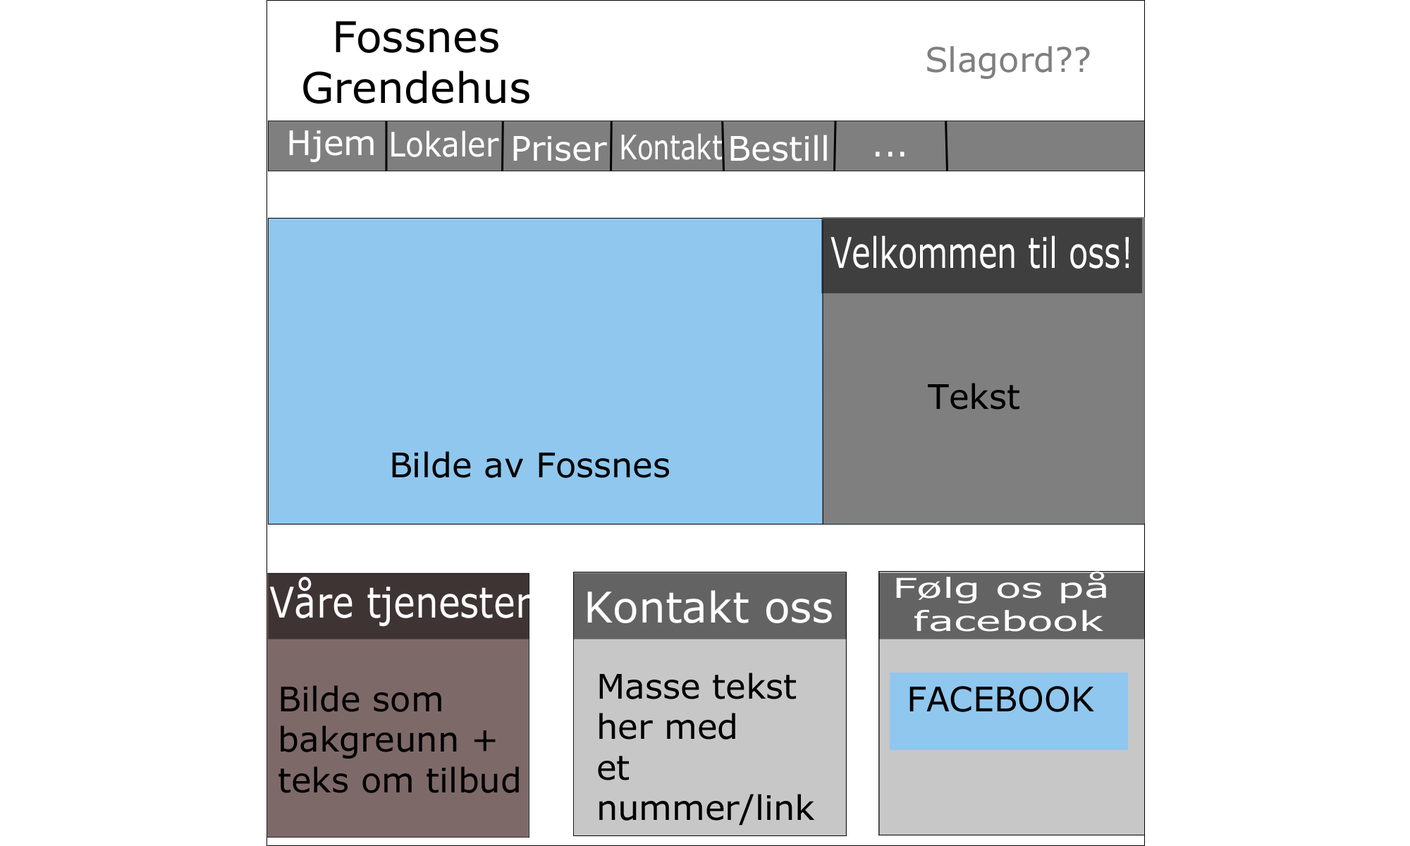
<style>
.page{position:relative;width:1410px;height:846px;background:#ffffff}
.page>*{position:absolute;margin:0}
.t1{font:42.3px "Verdana";color:#000000}
.t2{font:33.8px "Verdana";color:#7f7f7f}
.t3{font:33.8px "Verdana";color:#ffffff}
.t4{font:33.8px "Verdana";color:#ffffff;scale:0.89 1}
.t5{font:33.8px "Verdana";color:#ffffff;scale:0.78 1}
.t6{font:42.3px "Verdana";color:#ffffff;scale:0.74 1}
.t7{font:33.8px "Verdana";color:#000000}
.t8{font:42.3px "Verdana";color:#ffffff;scale:0.86 1}
.t9{font:27.5px "Verdana";color:#ffffff;scale:1.54 1}
.t10{font:42.3px "Verdana";color:#ffffff}
</style>
<div class="page">
<p class="t1" style="left:303px;top:21px;width:226px;height:83px;text-align:center">Fossnes<br>Grendehus</p>
<p class="t2" style="left:927px;top:46px;width:163px;height:33px">Slagord??</p>
<p class="t3" style="left:289px;top:130px;width:85px;height:32px">Hjem</p>
<p class="t4" style="left:391px;top:130px;width:108px;height:27px">Lokaler</p>
<p class="t3" style="left:513px;top:136px;width:94px;height:25px">Priser</p>
<p class="t5" style="left:621px;top:133px;width:101px;height:27px">Kontakt</p>
<p class="t3" style="left:730px;top:135px;width:97px;height:26px">Bestill</p>
<p class="t3" style="left:875px;top:152px;width:29px;height:4px">...</p>
<p class="t6" style="left:830px;top:235px;width:299px;height:34px">Velkommen til oss!</p>
<p class="t7" style="left:928px;top:383px;width:91px;height:27px">Tekst</p>
<p class="t7" style="left:392px;top:451px;width:277px;height:27px">Bilde av Fossnes</p>
<p class="t8" style="left:269px;top:577px;width:262px;height:50px">Våre tjenester</p>
<p class="t9" style="left:896px;top:571px;width:210px;height:61px;text-align:center">Følg os på <br>facebook</p>
<p class="t10" style="left:587px;top:590px;width:245px;height:33px">Kontakt oss</p>
<p class="t7" style="left:598px;top:672px;width:217px;height:153px">Masse tekst<br>her med<br>et <br>nummer/link</p>
<p class="t7" style="left:278px;top:685px;width:241px;height:108px">Bilde som <br>bakgreunn +<br>teks om tilbud</p>
<p class="t7" style="left:909px;top:686px;width:185px;height:26px">FACEBOOK</p>
</div>
